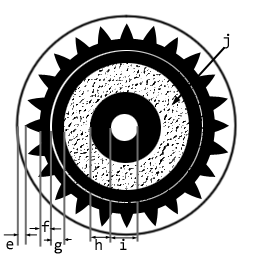
<style>
.page{position:relative;width:256px;height:256px;background:#ffffff}
.page>*{position:absolute;margin:0}
.t1{font:16px "Consolas";color:#000000}
</style>
<div class="page">
<p class="t1" style="left:223px;top:33px;width:7px;height:16px">j</p>
<p class="t1" style="left:41px;top:220px;width:9px;height:12px">f</p>
<p class="t1" style="left:6px;top:241px;width:8px;height:9px">e</p>
<p class="t1" style="left:54px;top:242px;width:8px;height:12px">g</p>
<p class="t1" style="left:95px;top:239px;width:7px;height:11px">h</p>
<p class="t1" style="left:120px;top:238px;width:7px;height:12px">i</p>
</div>
